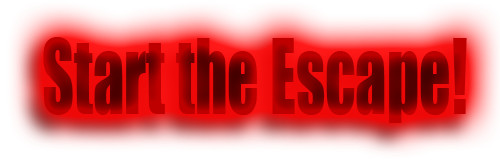
<style>
.page{position:relative;width:500px;height:160px}
.page>*{position:absolute;margin:0}
.t1{font:96px "Impact";scale:0.65 1}
</style>
<div class="page">
<p class="t1" style="left:43px;top:37px;width:424px;height:86px">Start the Escape!</p>
</div>
